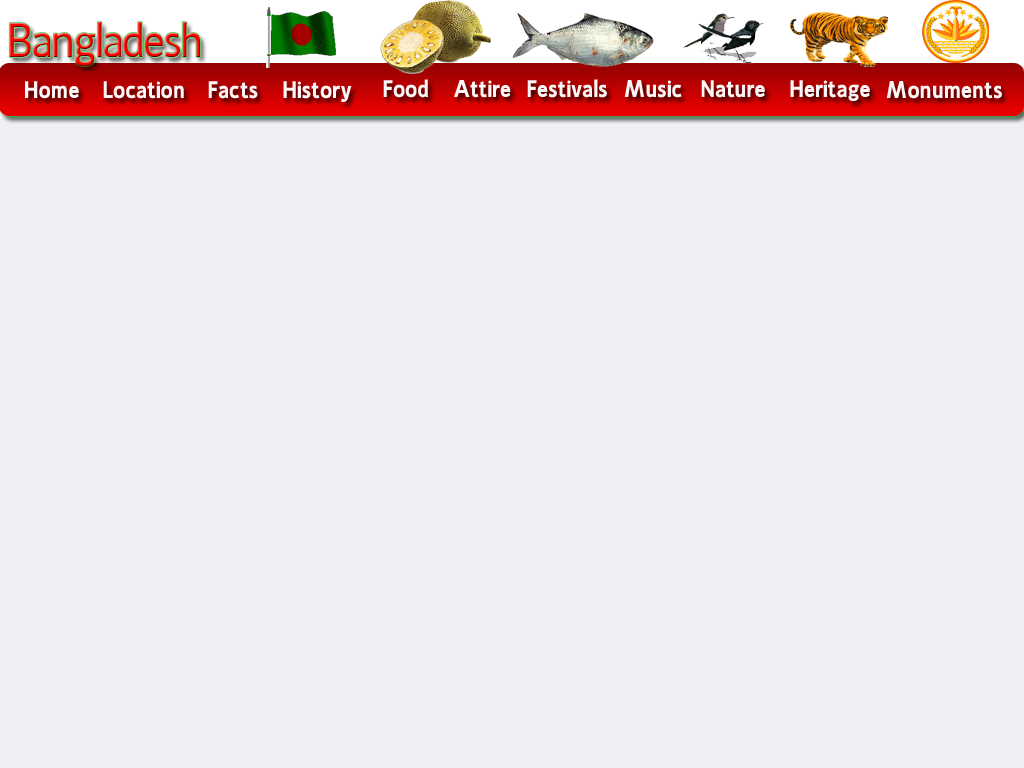
<style>
.page{position:relative;width:1024px;height:768px;background:#f0eff4}
.page>*{position:absolute;margin:0}
.t1{font:48px "Ligurino"}
.t2{font:24px "Ligurino-Bold";color:#fbf5f5}
</style>
<div class="page">
<p class="t1" style="left:9px;top:22px;width:192px;height:44px">Bangladesh</p>
<p class="t2" style="left:25px;top:81px;width:54px;height:18px">Home</p>
<p class="t2" style="left:103px;top:81px;width:81px;height:18px">Location</p>
<p class="t2" style="left:208px;top:81px;width:50px;height:18px">Facts</p>
<p class="t2" style="left:283px;top:81px;width:69px;height:21px">History</p>
<p class="t2" style="left:383px;top:79px;width:46px;height:19px">Food</p>
<p class="t2" style="left:454px;top:80px;width:57px;height:18px">Attire</p>
<p class="t2" style="left:527px;top:79px;width:80px;height:19px">Festivals</p>
<p class="t2" style="left:624px;top:80px;width:58px;height:18px">Music</p>
<p class="t2" style="left:701px;top:80px;width:64px;height:18px">Nature</p>
<p class="t2" style="left:790px;top:80px;width:80px;height:21px">Heritage</p>
<p class="t2" style="left:886px;top:81px;width:116px;height:18px">Monuments</p>
</div>
